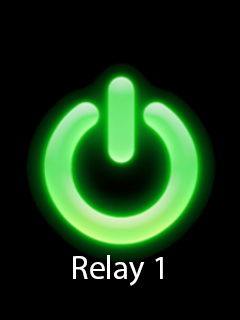
<style>
.page{position:relative;width:240px;height:320px;background:#000000}
.page>*{position:absolute;margin:0}
.t1{font:33.3px "MyriadPro-Regular";color:#ffffff}
</style>
<div class="page">
<p class="t1" style="left:73px;top:255px;width:90px;height:31px">Relay 1</p>
</div>
